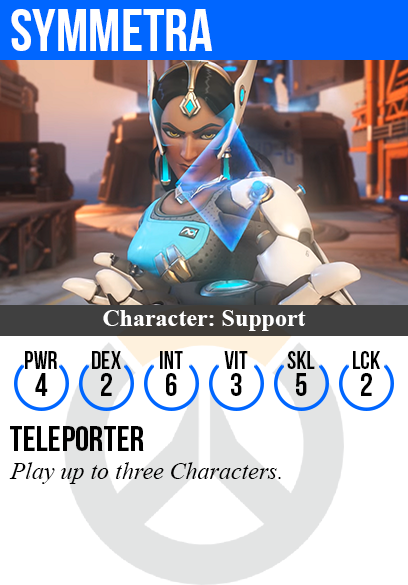
<style>
.page{position:relative;width:408px;height:585px;background:#ffffff}
.page>*{position:absolute;margin:0}
.t1{font:60px "BebasNeue";color:#ffffff}
.t2{font:24px "TimesNewRomanPS-BoldMT";color:#ffffff}
.t3{font:25px "BebasNeue";color:#000000}
.t4{font:32px "BebasNeue";color:#000000}
.t5{font:36px "BebasNeue";color:#000000}
.t6{font:24px "TimesNewRomanPS-ItalicMT";color:#000000}
</style>
<div class="page">
<p class="t1" style="left:11px;top:9px;width:201px;height:42px">symmetra</p>
<p class="t2" style="left:103px;top:310px;width:203px;height:21px">Character: Support</p>
<p class="t3" style="left:25px;top:351px;width:32px;height:18px">PWR</p>
<p class="t3" style="left:92px;top:351px;width:29px;height:18px">dex</p>
<p class="t3" style="left:160px;top:351px;width:23px;height:18px">int</p>
<p class="t3" style="left:224px;top:351px;width:24px;height:18px">vit</p>
<p class="t3" style="left:287px;top:351px;width:28px;height:18px">skl</p>
<p class="t3" style="left:353px;top:351px;width:27px;height:18px">lck</p>
<p class="t4" style="left:35px;top:373px;width:13px;height:23px">4</p>
<p class="t4" style="left:101px;top:373px;width:11px;height:23px">2</p>
<p class="t4" style="left:166px;top:373px;width:11px;height:23px">6</p>
<p class="t4" style="left:231px;top:373px;width:11px;height:23px">3</p>
<p class="t4" style="left:296px;top:373px;width:11px;height:23px">5</p>
<p class="t4" style="left:361px;top:373px;width:11px;height:23px">2</p>
<p class="t5" style="left:10px;top:426px;width:134px;height:25px">teleporter</p>
<p class="t6" style="left:9px;top:462px;width:272px;height:22px">Play up to three Characters.</p>
</div>
